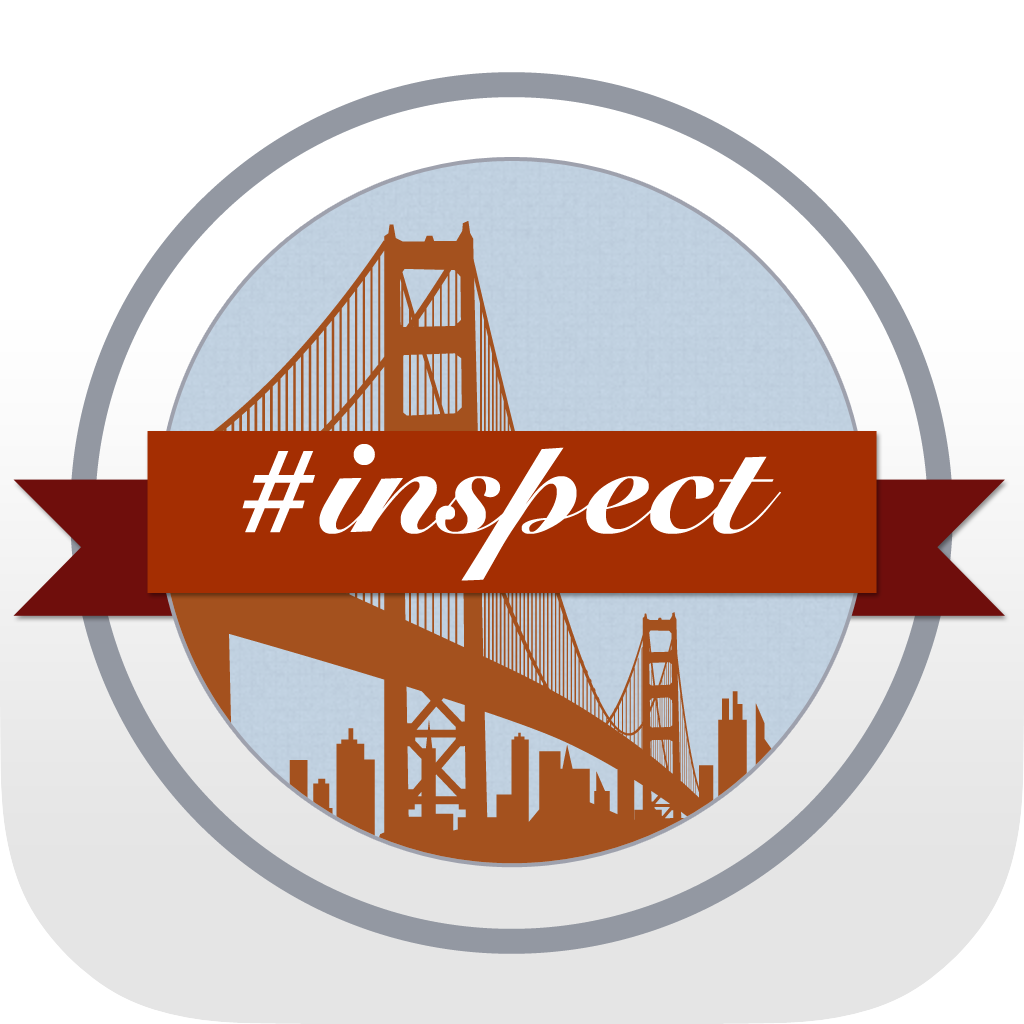
<style>
.page{position:relative;width:1024px;height:1024px;background:#ffffff}
.page>*{position:absolute;margin:0}
.t1{font:150px "SnellRoundhand-Black";color:#ffffff}
</style>
<div class="page">
<p class="t1" style="left:242px;top:444px;width:539px;height:137px">#inspect</p>
</div>
